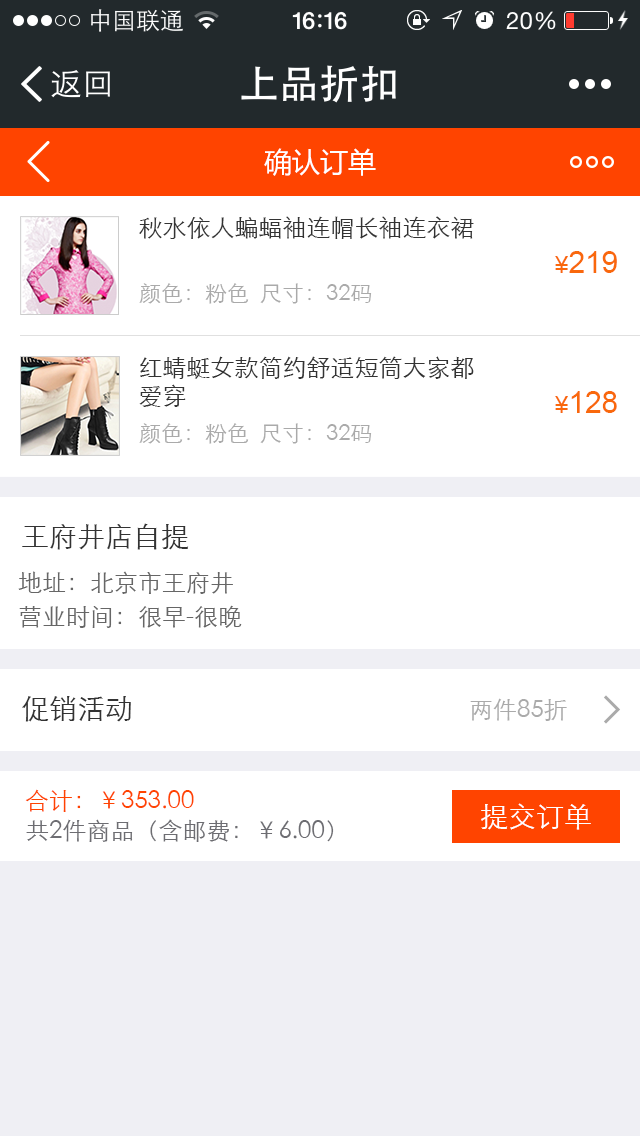
<style>
.page{position:relative;width:640px;height:1136px;background:#ffffff}
.page>*{position:absolute;margin:0}
.t1{font:28px "MicrosoftYaHei";color:#ffffff}
.t2{font:24px "STXihei";color:#333333}
.t3{font:30px "ArialMT";color:#f9680c}
.t4{font:24px "ArialMT";color:#f9680c}
.t5{font:22px "STXihei";color:#aaaaaa}
.t6{font:24px/28px "STXihei";color:#333333}
.t7{font:28px "STXihei";color:#333333}
.t8{font:24px/34px "STXihei";color:#666666}
.t9{font:24px "STXihei";color:#aaaaaa}
.t10{font:24px/30px "STXihei";color:#6d6d72}
.t11{font:24px/30px "STXihei";color:#ff4400}
.t12{font:28px "STXihei";color:#ffffff}
</style>
<div class="page">
<p class="t1" style="left:264px;top:148px;width:112px;height:28px">确认订单</p>
<p class="t2" style="left:139px;top:216px;width:335px;height:23px">秋水依人蝙蝠袖连帽长袖连衣裙</p>
<p class="t3" style="left:555px;top:251px;width:62px;height:22px"><span class="t4">¥</span>219</p>
<p class="t5" style="left:139px;top:283px;width:233px;height:21px">颜色：粉色  尺寸：32码</p>
<p class="t6" style="left:139px;top:356px;width:335px;height:51px">红蜻蜓女款简约舒适短筒大家都<br>爱穿</p>
<p class="t3" style="left:555px;top:391px;width:62px;height:22px"><span class="t4">¥</span>128</p>
<p class="t5" style="left:139px;top:423px;width:233px;height:21px">颜色：粉色  尺寸：32码</p>
<p class="t7" style="left:22px;top:523px;width:167px;height:27px">王府井店自提</p>
<p class="t8" style="left:18px;top:571px;width:224px;height:57px">地址：北京市王府井<br>营业时间：很早-很晚</p>
<p class="t7" style="left:22px;top:696px;width:109px;height:26px">促销活动</p>
<p class="t9" style="left:470px;top:698px;width:97px;height:23px">两件85折</p>
<p class="t10" style="left:25px;top:789px;width:309px;height:53px"><span class="t11">合计：￥353.00<br></span>共2件商品（含邮费：￥6.00）</p>
<p class="t12" style="left:481px;top:803px;width:110px;height:27px">提交订单</p>
</div>
